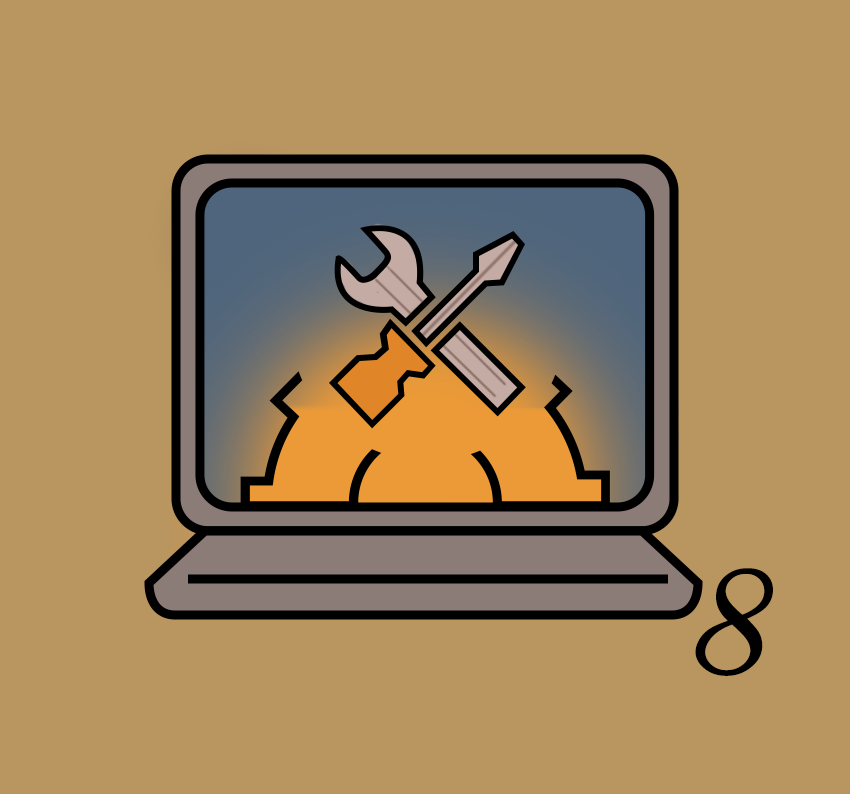
<style>
.page{position:relative;width:850px;height:794px;background:#b9955f}
.page>*{position:absolute;margin:0}
.t1{font:152.7px "CenturySchoolbook-Italic";color:#000000}
</style>
<div class="page">
<p class="t1" style="left:695px;top:568px;width:78px;height:108px">8</p>
</div>
